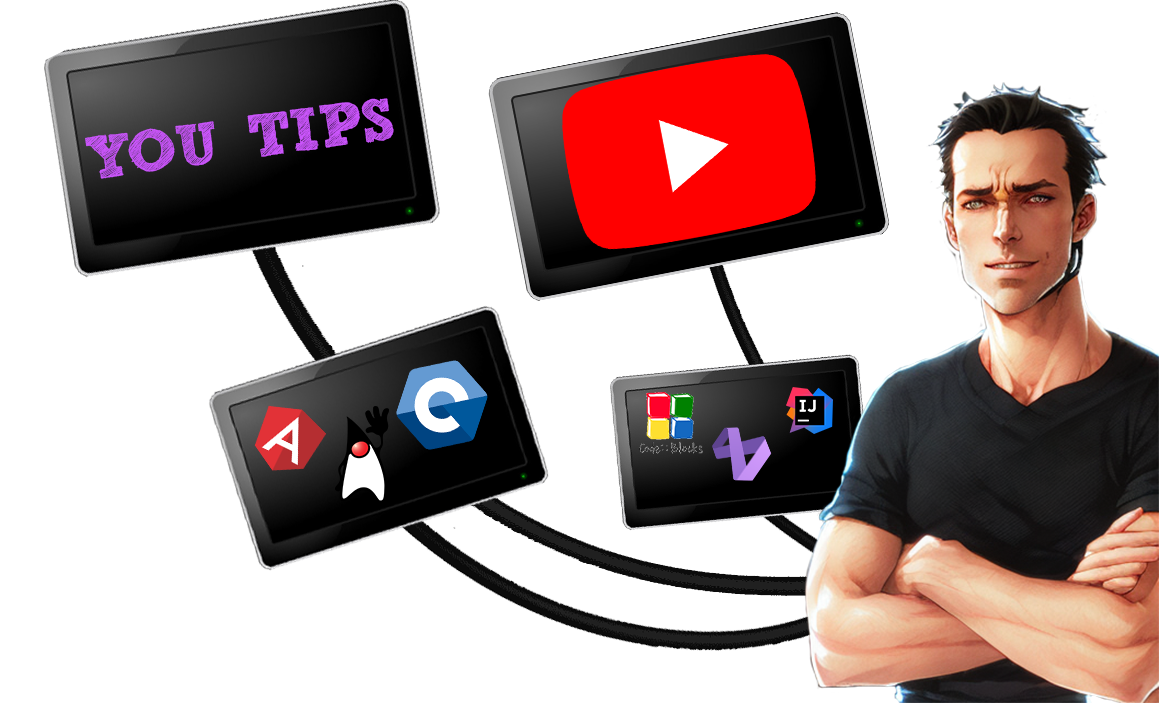
<style>
.page{position:relative;width:1159px;height:720px;background:#ffffff}
.page>*{position:absolute;margin:0}
.t1{font:59.9px "freeversionSketchBlock-Bold";color:#cb55fc}
</style>
<div class="page">
<p class="t1" style="left:85px;top:98px;width:309px;height:81px;rotate:-8deg">YOU TIPS</p>
</div>
